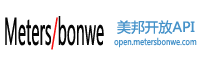
<style>
.page{position:relative;width:200px;height:60px;background:#ffffff}
.page>*{position:absolute;margin:0}
.t1{font:36px "MicrosoftYaHei";color:#060606;scale:0.4 1}
.t2{font:36px "MicrosoftYaHei";color:#f70e0e;scale:0.4 1}
.t3{font:13.8px "MicrosoftYaHei";color:#4592c9}
.t4{font:9px "MicrosoftYaHei";color:#4592c9;scale:0.79 1}
</style>
<div class="page">
<p class="t1" style="left:5px;top:16px;width:99px;height:34px">Meters<span class="t2">/</span>bonwe</p>
<p class="t3" style="left:117px;top:20px;width:78px;height:14px">美邦开放API</p>
<p class="t4" style="left:114px;top:37px;width:83px;height:11px">open.metersbonwe.com</p>
</div>
